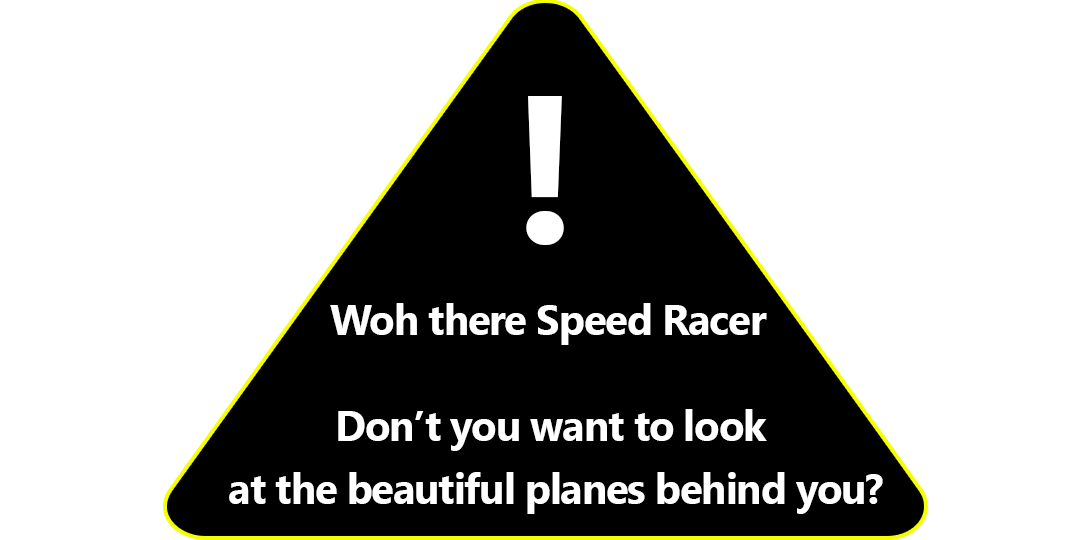
<style>
.page{position:relative;width:1080px;height:540px;background:#ffffff}
.page>*{position:absolute;margin:0}
.t1{font:208.3px "Gadugi-Bold";letter-spacing:-0.025em;color:#ffffff}
.t2{font:41.7px "Gadugi-Bold";letter-spacing:-0.025em;color:#ffffff}
.t3{font:41.7px/62.5px "Gadugi-Bold";letter-spacing:-0.025em;color:#ffffff}
.t4{font:41.7px/41.7px "Gadugi-Bold";letter-spacing:-0.025em;color:#ffffff}
</style>
<div class="page">
<p class="t1" style="left:526px;top:96px;width:38px;height:149px">!</p>
<p class="t2" style="left:330px;top:303px;width:437px;height:42px">Woh there Speed Racer</p>
<p class="t3" style="left:229px;top:409px;width:654px;height:105px;text-align:center"><span class="t4">Don’t you want to look <br></span>at the beautiful planes behind you?</p>
</div>
